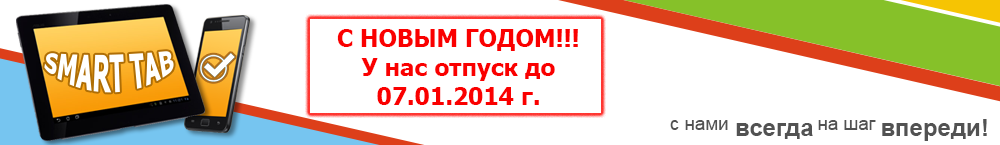
<style>
.page{position:relative;width:1000px;height:145px;background:#ffffff}
.page>*{position:absolute;margin:0}
.t1{font:24px "Tahoma-Bold";color:#fa0000}
.t2{font:18.7px "ArialMT";color:#525252}
.t3{font:24px "Arial-BoldMT";color:#525252}
</style>
<div class="page">
<p class="t1" style="left:337px;top:29px;width:241px;height:76px;text-align:center">С НОВЫМ ГОДОМ!!!<br>У нас отпуск до 07.01.2014 г.</p>
<p class="t2" style="left:670px;top:120px;width:206px;height:10px">с нами              на шаг</p>
<p class="t3" style="left:736px;top:119px;width:251px;height:22px"><span class="t2"> </span>всегда          впереди!</p>
</div>
